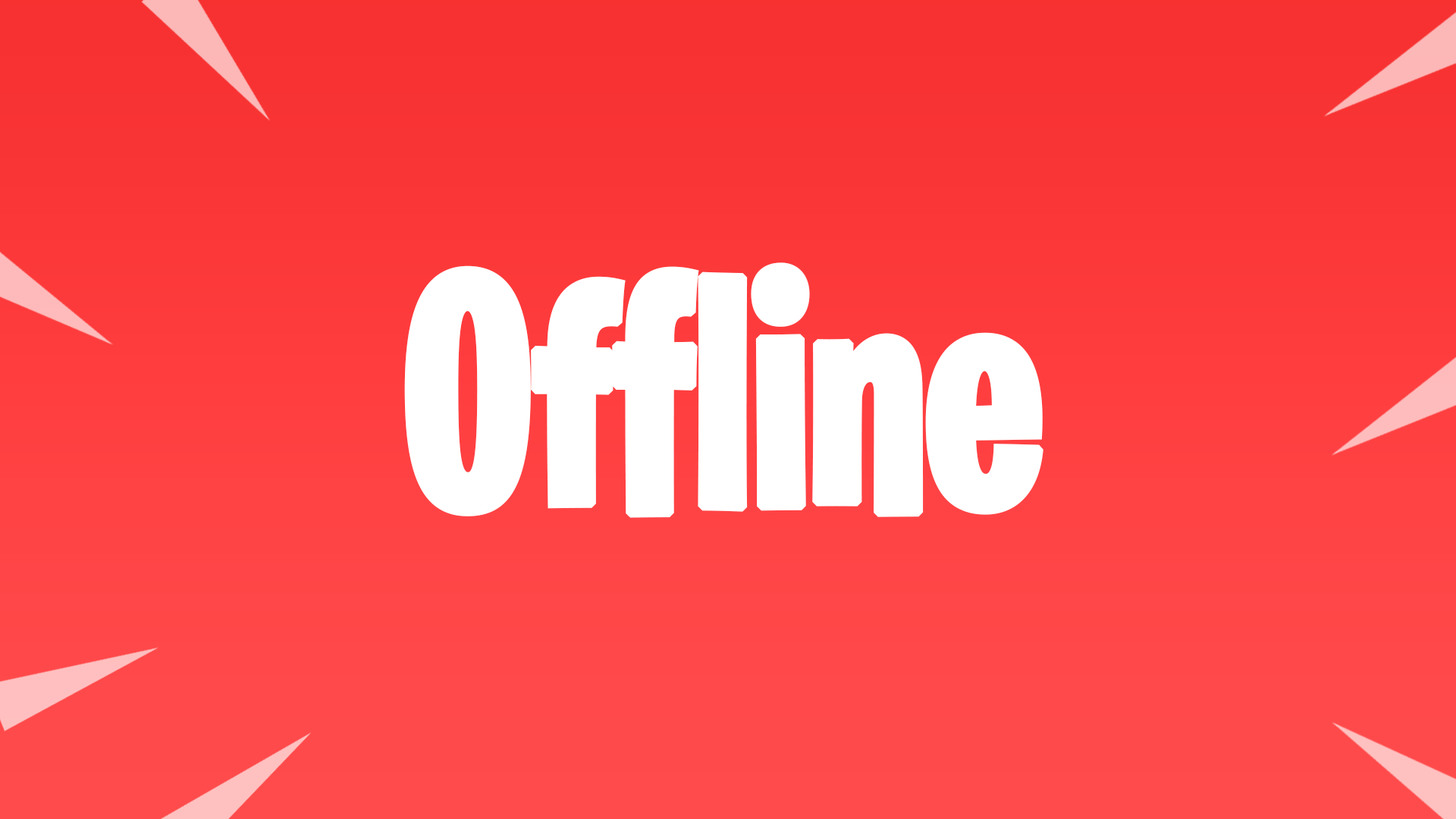
<style>
.page{position:relative;width:1456px;height:819px}
.page>*{position:absolute;margin:0}
.t1{font:333.7px "BurbankBigCondensed-Bold";letter-spacing:-0.025em;color:#ffffff;font-weight:bold;scale:0.91 1}
</style>
<div class="page">
<p class="t1" style="left:404px;top:262px;width:639px;height:256px">Offline</p>
</div>
